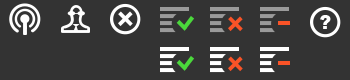
<style>
.page{position:relative;width:350px;height:80px;background:#333333}
.page>*{position:absolute;margin:0}
.t1{font:19px "Arial-Black";color:#fefefe}
</style>
<div class="page">
<p class="t1" style="left:320px;top:15px;width:11px;height:14px">?</p>
</div>
